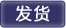
<style>
.page{position:relative;width:66px;height:28px}
.page>*{position:absolute;margin:0}
.t1{font:16px "MicrosoftYaHei";letter-spacing:0.1em;color:#ffffff;font-weight:bold}
</style>
<div class="page">
<p class="t1" style="left:15px;top:5px;width:35px;height:17px">发货</p>
</div>
